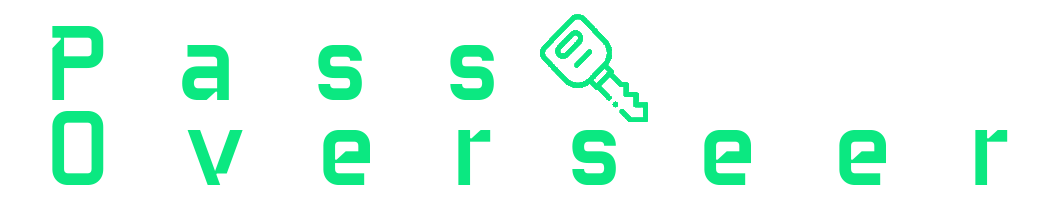
<style>
.page{position:relative;width:1060px;height:200px;background:#ffffff}
.page>*{position:absolute;margin:0}
.t1{font:105.8px/84.7px "BF_Modernista-Regular";letter-spacing:0.7em;color:#0be881}
</style>
<div class="page">
<p class="t1" style="left:52px;top:26px;width:956px;height:159px">Pass<br>Overseer</p>
</div>
